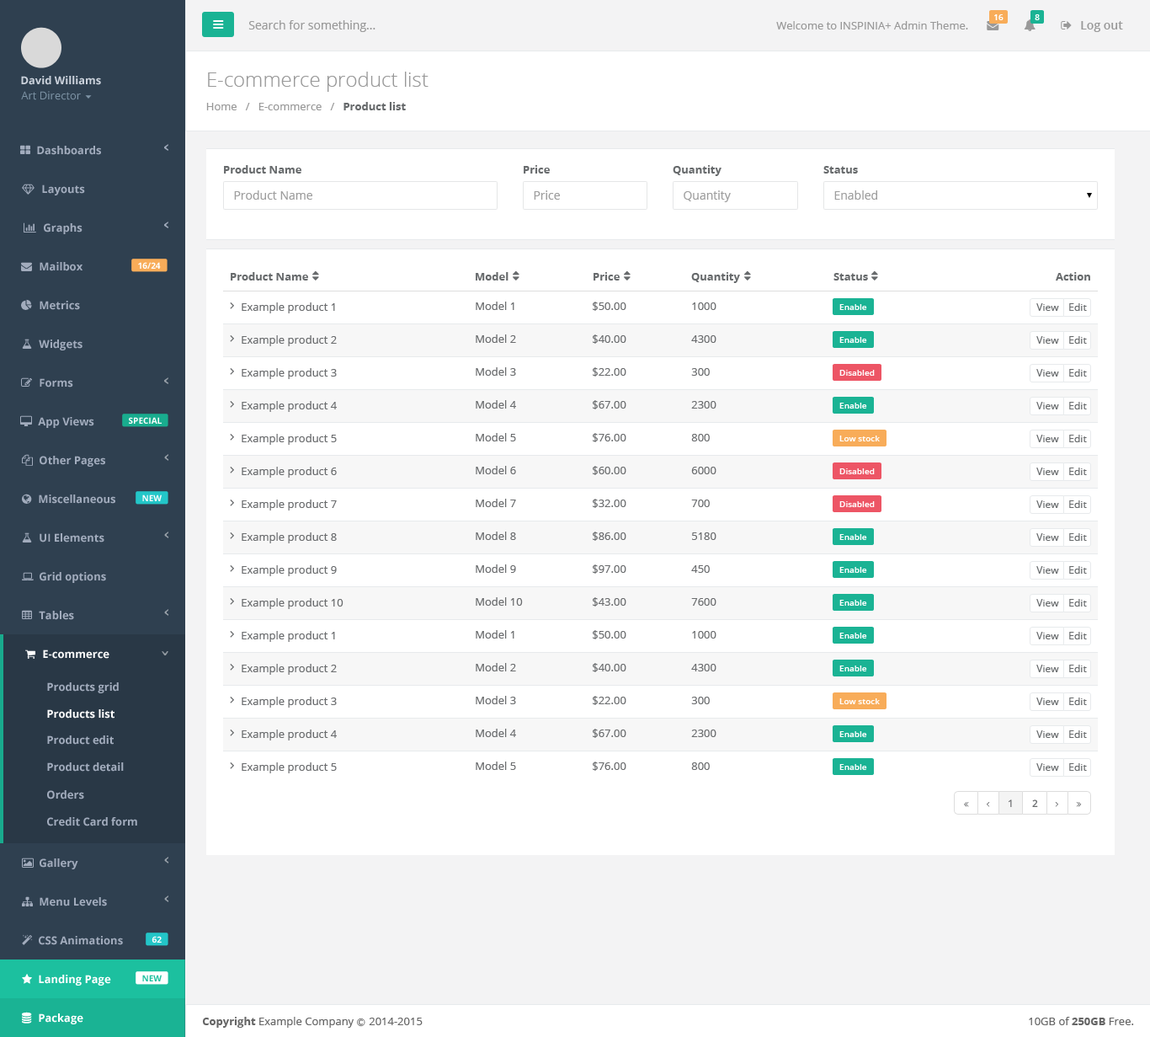
<style>
.page{position:relative;width:1150px;height:1037px;background:#ffffff}
.page>*{position:absolute;margin:0}
.t1{font:8.4px "OpenSans-Semibold";color:#ffffff}
.t2{font:11.8px "OpenSans";color:#999999}
.t3{font:10.9px "OpenSans";color:#999999}
.t4{font:11.8px "OpenSans-Semibold";color:#999999}
.t5{font:10.9px "OpenSans-Bold";color:#cad1db}
.t6{font:20.2px "OpenSans-Light";color:#999999}
.t7{font:10.9px "OpenSans";color:#7d93a5}
.t8{font:10.9px "OpenSans-Bold";color:#676a6c}
.t9{font:10.9px "OpenSans-Bold";color:#a2acbd}
.t10{font:11.8px "OpenSans";color:#9e9e9e}
.t11{font:8.4px "OpenSans-Bold";color:#fefefe}
.t12{font:10.9px "OpenSans";color:#6a6c6e}
.t13{font:8.4px "OpenSans-Semibold";color:#fffefe}
.t14{font:10.1px "OpenSans";color:#676a6c}
.t15{font:10.9px "OpenSans-Bold";color:#ffffff}
.t16{font:10.1px "OpenSans-Semibold";color:#6a6c6e}
.t17{font:8.4px "OpenSans-Bold";color:#1cc09f}
.t18{font:10.9px "OpenSans";color:#666666}
.t19{font:10.9px "OpenSans-Bold";color:#666666}
.t20{font:8.4px "Meiryo";color:#666666}
</style>
<div class="page">
<p class="t1" style="left:995px;top:14px;width:9px;height:6px">16</p>
<p class="t1" style="left:1035px;top:14px;width:5px;height:6px">8</p>
<p class="t2" style="left:248px;top:20px;width:128px;height:12px">Search for something...</p>
<p class="t3" style="left:776px;top:21px;width:192px;height:8px">Welcome to INSPINIA+ Admin Theme.</p>
<p class="t4" style="left:1081px;top:21px;width:42px;height:11px">Log out</p>
<p class="t5" style="left:21px;top:76px;width:80px;height:9px">David Williams</p>
<p class="t6" style="left:208px;top:72px;width:221px;height:20px">E-commerce product list</p>
<p class="t7" style="left:21px;top:91px;width:60px;height:9px">Art Director</p>
<p class="t3" style="left:206px;top:102px;width:200px;height:8px">Home   /   E-commerce   /   <span class="t8">Product list</span></p>
<p class="t9" style="left:37px;top:146px;width:64px;height:9px">Dashboards</p>
<p class="t8" style="left:224px;top:165px;width:77px;height:8px">Product Name</p>
<p class="t8" style="left:524px;top:165px;width:26px;height:8px">Price</p>
<p class="t8" style="left:673px;top:165px;width:49px;height:11px">Quantity</p>
<p class="t8" style="left:824px;top:166px;width:34px;height:7px">Status</p>
<p class="t9" style="left:42px;top:184px;width:43px;height:11px">Layouts</p>
<p class="t10" style="left:234px;top:190px;width:78px;height:10px">Product Name</p>
<p class="t10" style="left:534px;top:190px;width:26px;height:10px">Price</p>
<p class="t10" style="left:684px;top:190px;width:47px;height:12px">Quantity</p>
<p class="t10" style="left:835px;top:190px;width:42px;height:10px">Enabled</p>
<p class="t9" style="left:44px;top:223px;width:39px;height:11px">Graphs</p>
<p class="t9" style="left:40px;top:262px;width:43px;height:9px">Mailbox</p>
<p class="t11" style="left:138px;top:262px;width:23px;height:7px">16/24</p>
<p class="t8" style="left:231px;top:272px;width:77px;height:8px">Product Name</p>
<p class="t8" style="left:476px;top:272px;width:33px;height:8px">Model</p>
<p class="t8" style="left:594px;top:272px;width:26px;height:8px">Price</p>
<p class="t8" style="left:691px;top:272px;width:49px;height:11px">Quantity</p>
<p class="t8" style="left:834px;top:273px;width:34px;height:7px">Status</p>
<p class="t8" style="left:1056px;top:272px;width:35px;height:8px">Action</p>
<p class="t9" style="left:40px;top:301px;width:40px;height:9px">Metrics</p>
<p class="t12" style="left:242px;top:302px;width:93px;height:11px">Example product 1</p>
<p class="t12" style="left:476px;top:301px;width:39px;height:9px">Model 1</p>
<p class="t12" style="left:593px;top:301px;width:34px;height:10px">$50.00</p>
<p class="t12" style="left:692px;top:302px;width:25px;height:8px">1000</p>
<p class="t13" style="left:840px;top:304px;width:27px;height:6px">Enable</p>
<p class="t14" style="left:1037px;top:303px;width:22px;height:8px">View</p>
<p class="t14" style="left:1069px;top:303px;width:18px;height:8px">Edit</p>
<p class="t9" style="left:39px;top:339px;width:44px;height:11px">Widgets</p>
<p class="t12" style="left:242px;top:335px;width:95px;height:11px">Example product 2</p>
<p class="t12" style="left:476px;top:334px;width:40px;height:9px">Model 2</p>
<p class="t12" style="left:593px;top:334px;width:34px;height:10px">$40.00</p>
<p class="t12" style="left:691px;top:335px;width:26px;height:8px">4300</p>
<p class="t13" style="left:840px;top:337px;width:27px;height:6px">Enable</p>
<p class="t14" style="left:1037px;top:336px;width:22px;height:8px">View</p>
<p class="t14" style="left:1069px;top:336px;width:18px;height:8px">Edit</p>
<p class="t12" style="left:242px;top:368px;width:95px;height:11px">Example product 3</p>
<p class="t12" style="left:476px;top:367px;width:40px;height:9px">Model 3</p>
<p class="t12" style="left:593px;top:367px;width:34px;height:9px">$22.00</p>
<p class="t12" style="left:691px;top:368px;width:19px;height:8px">300</p>
<p class="t13" style="left:840px;top:370px;width:35px;height:6px">Disabled</p>
<p class="t14" style="left:1037px;top:369px;width:22px;height:7px">View</p>
<p class="t14" style="left:1069px;top:369px;width:18px;height:7px">Edit</p>
<p class="t9" style="left:40px;top:378px;width:33px;height:9px">Forms</p>
<p class="t12" style="left:242px;top:401px;width:95px;height:11px">Example product 4</p>
<p class="t12" style="left:476px;top:400px;width:40px;height:8px">Model 4</p>
<p class="t12" style="left:593px;top:400px;width:34px;height:9px">$67.00</p>
<p class="t12" style="left:691px;top:401px;width:26px;height:7px">2300</p>
<p class="t14" style="left:1037px;top:402px;width:22px;height:7px">View</p>
<p class="t14" style="left:1069px;top:402px;width:18px;height:7px">Edit</p>
<p class="t13" style="left:840px;top:403px;width:27px;height:5px">Enable</p>
<p class="t9" style="left:38px;top:417px;width:56px;height:11px">App Views</p>
<p class="t11" style="left:129px;top:417px;width:33px;height:7px">SPECIAL</p>
<p class="t12" style="left:242px;top:434px;width:95px;height:11px">Example product 5</p>
<p class="t12" style="left:476px;top:433px;width:40px;height:8px">Model 5</p>
<p class="t12" style="left:593px;top:433px;width:34px;height:9px">$76.00</p>
<p class="t12" style="left:691px;top:434px;width:19px;height:7px">800</p>
<p class="t13" style="left:840px;top:435px;width:40px;height:6px">Low stock</p>
<p class="t14" style="left:1037px;top:435px;width:22px;height:7px">View</p>
<p class="t14" style="left:1069px;top:435px;width:18px;height:7px">Edit</p>
<p class="t9" style="left:40px;top:456px;width:65px;height:11px">Other Pages</p>
<p class="t12" style="left:242px;top:467px;width:95px;height:10px">Example product 6</p>
<p class="t12" style="left:476px;top:466px;width:40px;height:8px">Model 6</p>
<p class="t12" style="left:593px;top:466px;width:34px;height:9px">$60.00</p>
<p class="t12" style="left:691px;top:467px;width:26px;height:7px">6000</p>
<p class="t13" style="left:840px;top:468px;width:35px;height:6px">Disabled</p>
<p class="t14" style="left:1037px;top:467px;width:22px;height:8px">View</p>
<p class="t14" style="left:1069px;top:467px;width:18px;height:8px">Edit</p>
<p class="t9" style="left:39px;top:494px;width:76px;height:10px">Miscellaneous</p>
<p class="t11" style="left:142px;top:494px;width:20px;height:7px">NEW</p>
<p class="t12" style="left:242px;top:499px;width:95px;height:11px">Example product 7</p>
<p class="t12" style="left:476px;top:499px;width:40px;height:8px">Model 7</p>
<p class="t12" style="left:593px;top:499px;width:34px;height:9px">$32.00</p>
<p class="t12" style="left:691px;top:499px;width:19px;height:8px">700</p>
<p class="t13" style="left:840px;top:501px;width:35px;height:6px">Disabled</p>
<p class="t14" style="left:1037px;top:500px;width:22px;height:8px">View</p>
<p class="t14" style="left:1069px;top:500px;width:18px;height:8px">Edit</p>
<p class="t9" style="left:40px;top:533px;width:64px;height:9px">UI Elements</p>
<p class="t12" style="left:242px;top:532px;width:95px;height:11px">Example product 8</p>
<p class="t12" style="left:476px;top:531px;width:40px;height:9px">Model 8</p>
<p class="t12" style="left:593px;top:531px;width:34px;height:10px">$86.00</p>
<p class="t12" style="left:692px;top:532px;width:25px;height:8px">5180</p>
<p class="t13" style="left:840px;top:534px;width:27px;height:6px">Enable</p>
<p class="t14" style="left:1037px;top:533px;width:22px;height:8px">View</p>
<p class="t14" style="left:1069px;top:533px;width:18px;height:8px">Edit</p>
<p class="t12" style="left:242px;top:565px;width:95px;height:11px">Example product 9</p>
<p class="t12" style="left:476px;top:564px;width:40px;height:9px">Model 9</p>
<p class="t12" style="left:593px;top:564px;width:34px;height:9px">$97.00</p>
<p class="t12" style="left:691px;top:565px;width:19px;height:8px">450</p>
<p class="t13" style="left:840px;top:567px;width:27px;height:6px">Enable</p>
<p class="t14" style="left:1037px;top:566px;width:22px;height:7px">View</p>
<p class="t14" style="left:1069px;top:566px;width:18px;height:7px">Edit</p>
<p class="t9" style="left:40px;top:572px;width:66px;height:11px">Grid options</p>
<p class="t12" style="left:242px;top:598px;width:102px;height:11px">Example product 10</p>
<p class="t12" style="left:476px;top:597px;width:47px;height:8px">Model 10</p>
<p class="t12" style="left:593px;top:597px;width:34px;height:9px">$43.00</p>
<p class="t12" style="left:691px;top:598px;width:26px;height:7px">7600</p>
<p class="t13" style="left:840px;top:600px;width:27px;height:5px">Enable</p>
<p class="t14" style="left:1037px;top:599px;width:22px;height:7px">View</p>
<p class="t14" style="left:1069px;top:599px;width:18px;height:7px">Edit</p>
<p class="t9" style="left:39px;top:611px;width:35px;height:9px">Tables</p>
<p class="t12" style="left:476px;top:630px;width:39px;height:8px">Model 1</p>
<p class="t12" style="left:593px;top:630px;width:34px;height:9px">$50.00</p>
<p class="t12" style="left:242px;top:631px;width:93px;height:11px">Example product 1</p>
<p class="t12" style="left:692px;top:631px;width:25px;height:7px">1000</p>
<p class="t13" style="left:840px;top:632px;width:27px;height:6px">Enable</p>
<p class="t14" style="left:1037px;top:632px;width:22px;height:7px">View</p>
<p class="t14" style="left:1069px;top:632px;width:18px;height:7px">Edit</p>
<p class="t15" style="left:43px;top:649px;width:66px;height:10px">E-commerce</p>
<p class="t12" style="left:242px;top:664px;width:95px;height:11px">Example product 2</p>
<p class="t12" style="left:476px;top:663px;width:40px;height:8px">Model 2</p>
<p class="t12" style="left:593px;top:663px;width:34px;height:9px">$40.00</p>
<p class="t12" style="left:691px;top:664px;width:26px;height:7px">4300</p>
<p class="t13" style="left:840px;top:665px;width:27px;height:6px">Enable</p>
<p class="t14" style="left:1037px;top:664px;width:22px;height:8px">View</p>
<p class="t14" style="left:1069px;top:664px;width:18px;height:8px">Edit</p>
<p class="t9" style="left:47px;top:682px;width:72px;height:11px">Products grid</p>
<p class="t12" style="left:242px;top:696px;width:95px;height:11px">Example product 3</p>
<p class="t12" style="left:476px;top:696px;width:40px;height:8px">Model 3</p>
<p class="t12" style="left:593px;top:696px;width:34px;height:9px">$22.00</p>
<p class="t12" style="left:691px;top:696px;width:19px;height:8px">300</p>
<p class="t13" style="left:840px;top:698px;width:40px;height:6px">Low stock</p>
<p class="t14" style="left:1037px;top:697px;width:22px;height:8px">View</p>
<p class="t14" style="left:1069px;top:697px;width:18px;height:8px">Edit</p>
<p class="t15" style="left:47px;top:709px;width:68px;height:9px">Products list</p>
<p class="t9" style="left:47px;top:735px;width:67px;height:9px">Product edit</p>
<p class="t12" style="left:242px;top:729px;width:95px;height:11px">Example product 4</p>
<p class="t12" style="left:476px;top:728px;width:40px;height:9px">Model 4</p>
<p class="t12" style="left:593px;top:728px;width:34px;height:10px">$67.00</p>
<p class="t12" style="left:691px;top:729px;width:26px;height:8px">2300</p>
<p class="t13" style="left:840px;top:731px;width:27px;height:6px">Enable</p>
<p class="t14" style="left:1037px;top:730px;width:22px;height:8px">View</p>
<p class="t14" style="left:1069px;top:730px;width:18px;height:8px">Edit</p>
<p class="t12" style="left:476px;top:761px;width:40px;height:9px">Model 5</p>
<p class="t12" style="left:593px;top:761px;width:34px;height:10px">$76.00</p>
<p class="t9" style="left:47px;top:762px;width:77px;height:9px">Product detail</p>
<p class="t12" style="left:242px;top:762px;width:95px;height:11px">Example product 5</p>
<p class="t12" style="left:691px;top:762px;width:19px;height:8px">800</p>
<p class="t13" style="left:840px;top:764px;width:27px;height:6px">Enable</p>
<p class="t14" style="left:1037px;top:763px;width:22px;height:8px">View</p>
<p class="t14" style="left:1069px;top:763px;width:18px;height:8px">Edit</p>
<p class="t9" style="left:47px;top:790px;width:37px;height:9px">Orders</p>
<p class="t16" style="left:1009px;top:799px;width:3px;height:8px">1</p>
<p class="t16" style="left:1032px;top:799px;width:6px;height:8px">2</p>
<p class="t9" style="left:47px;top:817px;width:90px;height:9px">Credit Card form</p>
<p class="t9" style="left:40px;top:858px;width:38px;height:11px">Gallery</p>
<p class="t9" style="left:40px;top:897px;width:67px;height:9px">Menu Levels</p>
<p class="t9" style="left:39px;top:936px;width:84px;height:9px">CSS Animations</p>
<p class="t11" style="left:152px;top:936px;width:10px;height:6px">62</p>
<p class="t15" style="left:39px;top:974px;width:72px;height:11px">Landing Page</p>
<p class="t17" style="left:142px;top:974px;width:20px;height:7px">NEW</p>
<p class="t15" style="left:39px;top:1013px;width:44px;height:11px">Package</p>
<p class="t18" style="left:202px;top:1016px;width:221px;height:11px"><span class="t19">Copyright</span> Example Company <span class="t20">Ⓒ </span>2014-2015</p>
<p class="t18" style="left:1029px;top:1016px;width:105px;height:9px">10GB of <span class="t19">250GB</span> Free.</p>
</div>
